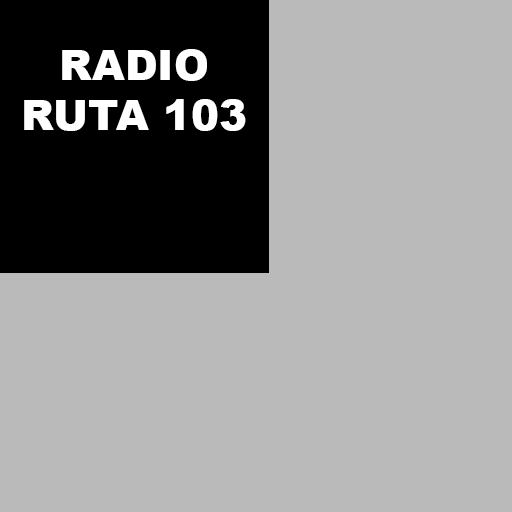
<style>
.page{position:relative;width:512px;height:512px;background:#bababa}
.page>*{position:absolute;margin:0}
.t1{font:42px "Arial-Black";color:#ffffff}
</style>
<div class="page">
<p class="t1" style="left:24px;top:49px;width:222px;height:82px;text-align:center">RADIO<br>RUTA 103</p>
</div>
